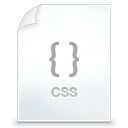
<style>
.page{position:relative;width:128px;height:128px;background:#ffffff}
.page>*{position:absolute;margin:0}
.t1{font:38px "Lato-Bold";color:#aaaaaa}
.t2{font:13px "HelveticaNeue-Bold";color:#cccccc}
</style>
<div class="page">
<p class="t1" style="left:49px;top:42px;width:30px;height:35px">{ }</p>
<p class="t2" style="left:51px;top:87px;width:27px;height:10px">CSS</p>
</div>
